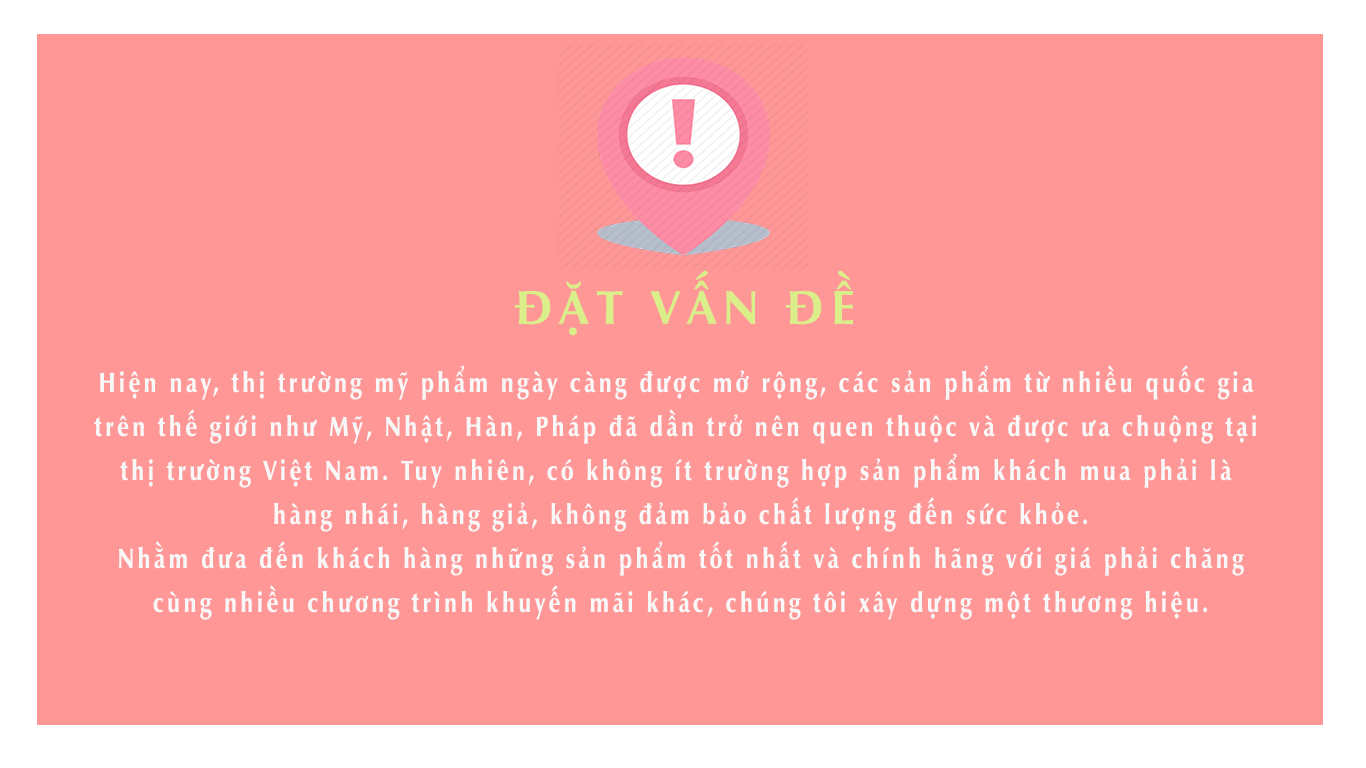
<style>
.page{position:relative;width:1366px;height:768px;background:#ff9797}
.page>*{position:absolute;margin:0}
.t1{font:48px "UVNNhanBold";letter-spacing:0.15em;color:#daee8a;text-transform:uppercase}
.t2{font:28px/22px "UVNNhanNang";letter-spacing:0.15em;color:#f8f8f8;scale:0.79 1}
</style>
<div class="page">
<p class="t1" style="left:515px;top:270px;width:338px;height:66px">đặt vấn đề</p>
<p class="t2" style="left:94px;top:365px;width:1162px;height:255px;text-align:center">Hiện nay, thị trường mỹ phẩm ngày càng được mở rộng, các sản phẩm từ nhiều quốc gia <br><br>trên thế giới như Mỹ, Nhật, Hàn, Pháp đã dần trở nên quen thuộc và được ưa chuộng tại <br><br>thị trường Việt Nam. Tuy nhiên, có không ít trường hợp sản phẩm khách mua phải là <br><br>hàng nhái, hàng giả, không đảm bảo chất lượng đến sức khỏe.<br><br>Nhằm đưa đến khách hàng những sản phẩm tốt nhất và chính hãng với giá phải chăng<br><br>cùng nhiều chương trình khuyến mãi khác, chúng tôi xây dựng một thương hiệu.</p>
</div>
